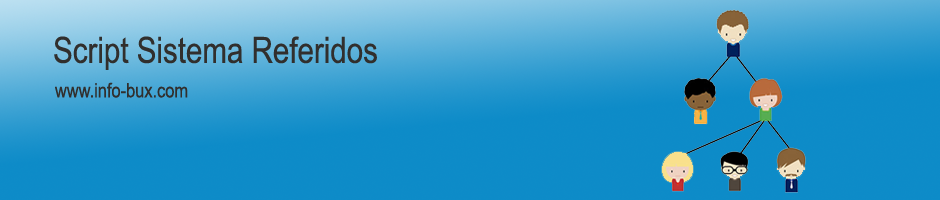
<style>
.page{position:relative;width:940px;height:200px}
.page>*{position:absolute;margin:0}
.t1{font:36px "ArialNarrow";color:#312f2d}
.t2{font:20px "ArialNarrow";color:#312f2d}
</style>
<div class="page">
<p class="t1" style="left:54px;top:36px;width:323px;height:34px">Script Sistema Referidos</p>
<p class="t2" style="left:55px;top:82px;width:133px;height:16px">www.info-bux.com</p>
</div>
